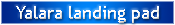
<style>
.page{position:relative;width:175px;height:25px}
.page>*{position:absolute;margin:0}
.t1{font:18px "TrebuchetMS";color:#ffffff}
</style>
<div class="page">
<p class="t1" style="left:16px;top:6px;width:143px;height:17px">Yalara landing pad</p>
</div>
